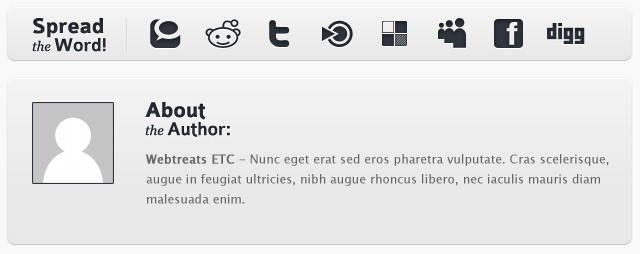
<style>
.page{position:relative;width:640px;height:254px;background:#e9e9e9}
.page>*{position:absolute;margin:0}
.t1{font:22.6px/18px "Colaborate-Bold";color:#24292f}
.t2{font:13.5px/18px "Georgia-Italic";color:#24292f}
.t3{font:19.5px/18px "Colaborate-Medium";color:#24292f}
.t4{font:19.5px/18px "Colaborate-Medium";color:#23282e}
.t5{font:22.6px/18px "Colaborate-Bold";color:#23282e}
.t6{font:13.5px/18px "Georgia-Italic";color:#23282e}
.t7{font:12px/20px "LucidaGrande";letter-spacing:0.005em;color:#666666}
.t8{font:12px/20px "LucidaGrande";letter-spacing:0.005em;color:#666666;font-weight:bold}
</style>
<div class="page">
<p class="t1" style="left:32px;top:18px;width:74px;height:34px">Spread<br><span class="t2">the </span><span class="t3">Word!</span></p>
<p class="t4" style="left:145px;top:102px;width:85px;height:35px"><span class="t5">About<br></span><span class="t6">the </span>Author:</p>
<p class="t7" style="left:146px;top:154px;width:463px;height:50px"><span class="t8">Webtreats ETC</span> - Nunc eget erat sed eros pharetra vulputate. Cras scelerisque, augue in feugiat ultricies, nibh augue rhoncus libero, nec iaculis mauris diam malesuada enim.</p>
</div>
